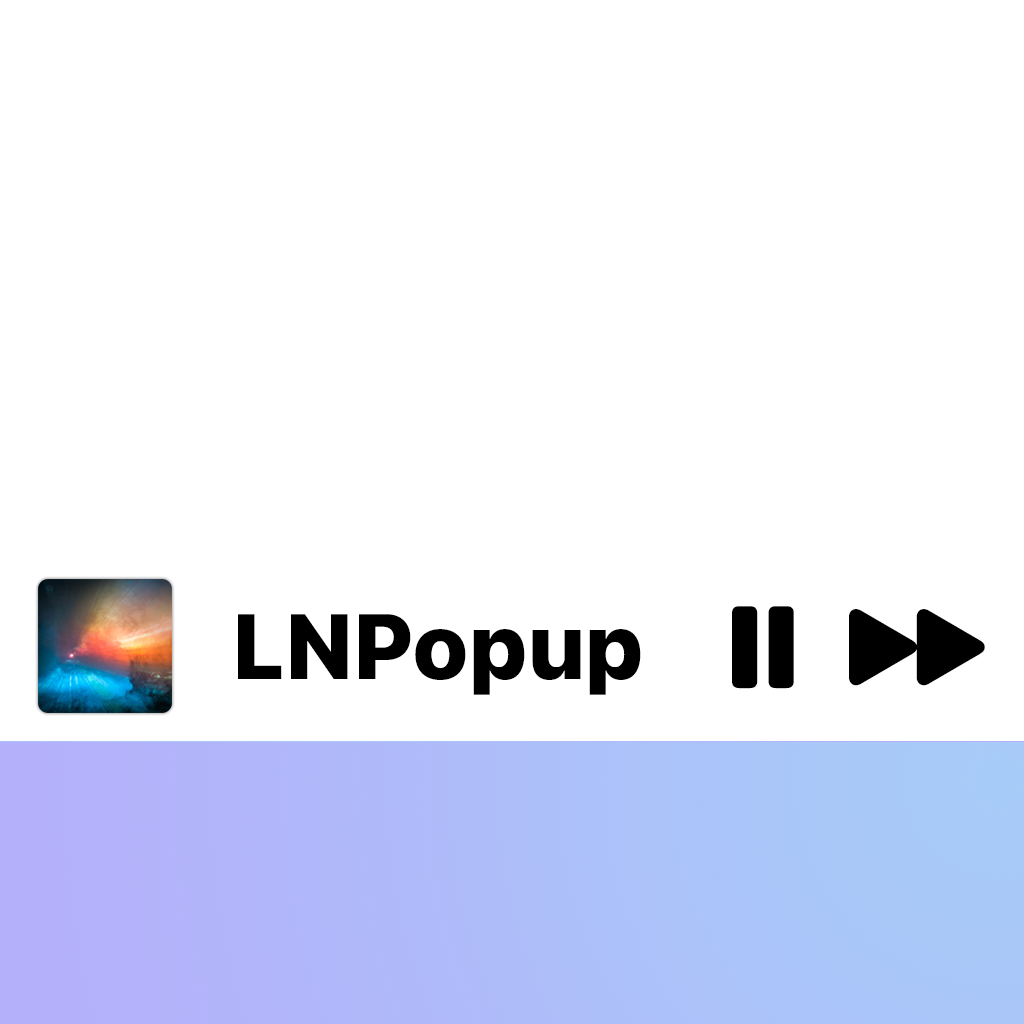
<style>
.page{position:relative;width:1024px;height:1024px;background:#ffffff}
.page>*{position:absolute;margin:0}
.t1{font:92px "SFProDisplay-Heavy";letter-spacing:0.02em;color:#000000}
</style>
<div class="page">
<p class="t1" style="left:238px;top:614px;width:403px;height:81px">LNPopup</p>
</div>
